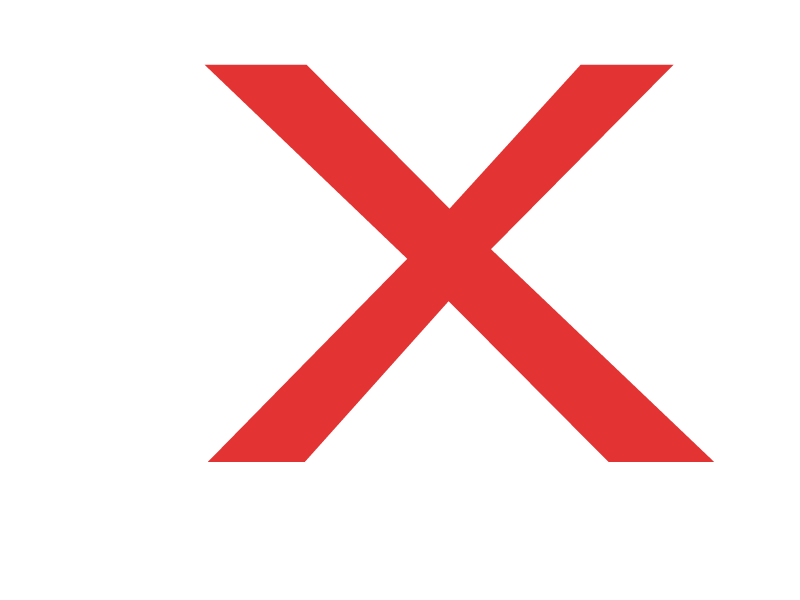
<style>
.page{position:relative;width:800px;height:600px;background:#ffffff}
.page>*{position:absolute;margin:0}
.t1{font:937px "BankGothicBT-Light";color:#e33333}
.t2{font:639px "BankGothicBT-Light";color:#000000}
</style>
<div class="page">
<p class="t1" style="left:204px;top:64px;width:510px;height:398px"><span class="t2"><br></span>x</p>
</div>
